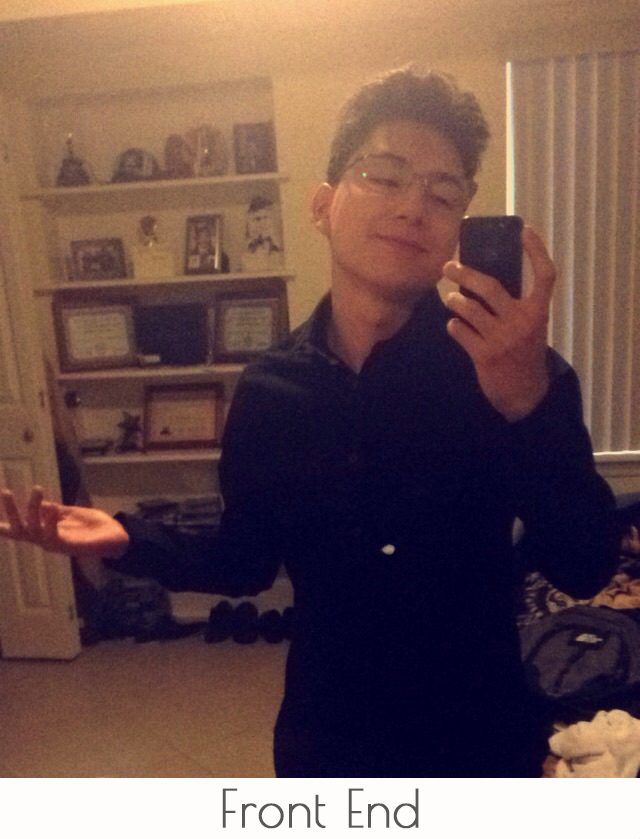
<style>
.page{position:relative;width:640px;height:839px}
.page>*{position:absolute;margin:0}
.t1{font:51.2px "PoiretOne-Regular";letter-spacing:0.005em;color:#575757;font-weight:bold;scale:0.96 1}
</style>
<div class="page">
<p class="t1" style="left:222px;top:788px;width:197px;height:41px">Front End</p>
</div>
